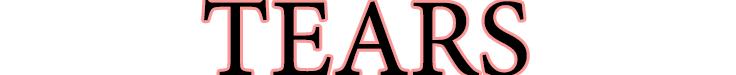
<style>
.page{position:relative;width:736px;height:75px;background:#ffffff}
.page>*{position:absolute;margin:0}
.t1{font:111px "MinionPro-Regular";color:#000000}
</style>
<div class="page">
<p class="t1" style="left:204px;top:0px;width:323px;height:77px">TEARS</p>
</div>
